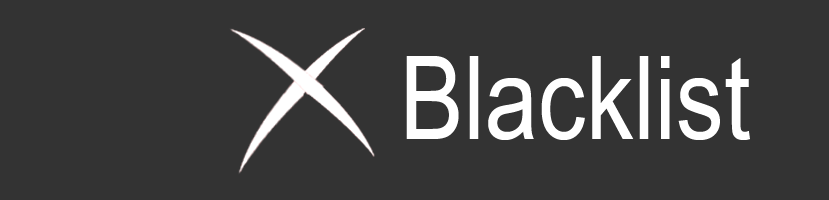
<style>
.page{position:relative;width:829px;height:200px;background:#333333}
.page>*{position:absolute;margin:0}
.t1{font:116.5px "ArialNarrow";color:#ffffff}
</style>
<div class="page">
<p class="t1" style="left:406px;top:56px;width:344px;height:84px">Blacklist</p>
</div>
